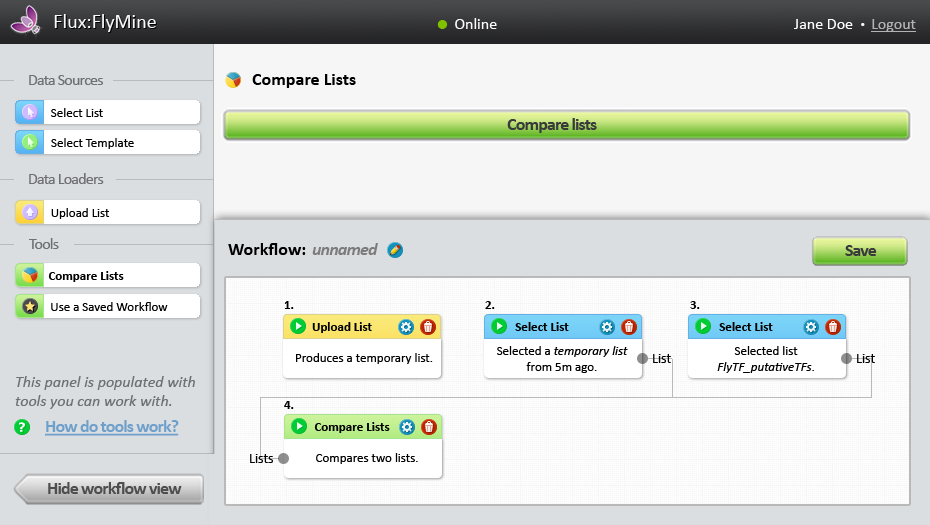
<style>
.page{position:relative;width:930px;height:525px;background:#dadee1}
.page>*{position:absolute;margin:0}
.t1{font:20px "Calibri";color:#f9f9f9}
.t2{font:16px "Calibri";color:#fafafa}
.t3{font:30px "Calibri";color:#81c000}
.t4{font:10px "Calibri";color:#fafafa}
.t5{font:16px "Calibri";color:#b3b3b3;text-decoration:underline}
.t6{font:16px "Calibri";letter-spacing:-0.05em;color:#6f7074}
.t7{font:18px "Calibri-Bold";color:#000000}
.t8{font:13px "Calibri";color:#000000}
.t9{font:18px "Calibri-Bold";letter-spacing:-0.05em;color:#3a3a3a}
.t10{font:18px "Calibri-BoldItalic";letter-spacing:-0.05em;color:#7c7c7c}
.t11{font:13px "Calibri-Bold";color:#000000}
.t12{font:13px "Calibri-Italic";color:#000000}
.t13{font:14px "Calibri";color:#000000}
.t14{font:16px "Calibri-Italic";color:#6f7074}
.t15{font:18px "Calibri-Bold";letter-spacing:-0.05em;color:#6fa0cb;text-decoration:underline}
.t16{font:18px "Calibri-Bold";letter-spacing:-0.05em;color:#4e4e4f}
</style>
<div class="page">
<p class="t1" style="left:54px;top:14px;width:102px;height:18px">Flux:FlyMine</p>
<p class="t2" style="left:437px;top:18px;width:60px;height:11px"><span class="t3">•  </span>Online</p>
<p class="t2" style="left:794px;top:19px;width:122px;height:13px">Jane Doe  <span class="t4">•  </span><span class="t5">Logout</span></p>
<p class="t6" style="left:29px;top:75px;width:74px;height:10px">Data Sources</p>
<p class="t7" style="left:252px;top:74px;width:104px;height:14px">Compare Lists</p>
<p class="t8" style="left:51px;top:108px;width:52px;height:9px">Select List</p>
<p class="t9" style="left:507px;top:118px;width:90px;height:15px">Compare lists</p>
<p class="t8" style="left:51px;top:138px;width:83px;height:11px">Select Template</p>
<p class="t6" style="left:29px;top:173px;width:75px;height:11px">Data Loaders</p>
<p class="t8" style="left:51px;top:208px;width:59px;height:11px">Upload List</p>
<p class="t6" style="left:29px;top:238px;width:30px;height:11px">Tools</p>
<p class="t7" style="left:228px;top:243px;width:78px;height:12px">Workflow:</p>
<p class="t10" style="left:312px;top:243px;width:66px;height:12px">unnamed</p>
<p class="t9" style="left:845px;top:245px;width:32px;height:11px">Save</p>
<p class="t11" style="left:48px;top:271px;width:76px;height:11px">Compare Lists</p>
<p class="t8" style="left:51px;top:302px;width:117px;height:9px">Use a Saved Workflow</p>
<p class="t11" style="left:284px;top:301px;width:10px;height:8px">1.</p>
<p class="t11" style="left:485px;top:301px;width:10px;height:8px">2.</p>
<p class="t11" style="left:690px;top:301px;width:10px;height:8px">3.</p>
<p class="t11" style="left:312px;top:322px;width:60px;height:11px">Upload List</p>
<p class="t11" style="left:515px;top:322px;width:54px;height:9px">Select List</p>
<p class="t11" style="left:719px;top:322px;width:54px;height:9px">Select List</p>
<p class="t8" style="left:296px;top:353px;width:137px;height:11px">Produces a temporary list.</p>
<p class="t12" style="left:497px;top:346px;width:131px;height:27px;text-align:center"><span class="t8">Selected a </span>temporary list<br><span class="t8">from 5m ago.</span></p>
<p class="t12" style="left:717px;top:346px;width:97px;height:27px;text-align:center"><span class="t8">Selected list<br></span>FlyTF_putativeTFs<span class="t8">.</span></p>
<p class="t13" style="left:653px;top:354px;width:18px;height:9px">List</p>
<p class="t13" style="left:857px;top:354px;width:18px;height:9px">List</p>
<p class="t14" style="left:15px;top:376px;width:180px;height:33px">This panel is populated with<br>tools you can work with.</p>
<p class="t11" style="left:284px;top:401px;width:10px;height:8px">4.</p>
<p class="t15" style="left:45px;top:420px;width:134px;height:16px">How do tools work?</p>
<p class="t11" style="left:314px;top:422px;width:76px;height:11px">Compare Lists</p>
<p class="t13" style="left:250px;top:454px;width:23px;height:9px">Lists</p>
<p class="t8" style="left:316px;top:453px;width:102px;height:11px">Compares two lists.</p>
<p class="t16" style="left:48px;top:482px;width:134px;height:12px">Hide workflow view</p>
</div>
